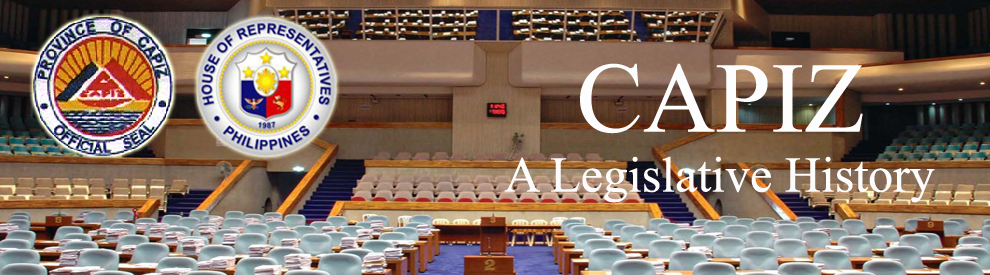
<style>
.page{position:relative;width:990px;height:275px}
.page>*{position:absolute;margin:0}
.t1{font:50px "TimesNewRomanPSMT";color:#fdfcfc}
.t2{font:100px "TimesNewRomanPSMT";color:#fdfdfd}
</style>
<div class="page">
<p class="t1" style="left:504px;top:63px;width:431px;height:140px;text-align:center"><span class="t2">CAPIZ<br></span>A Legislative History</p>
</div>
